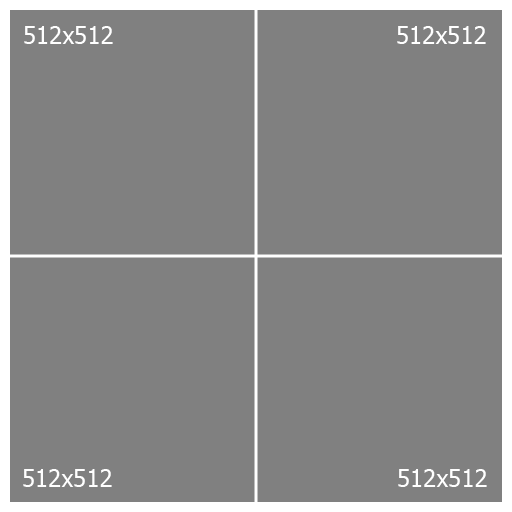
<style>
.page{position:relative;width:512px;height:512px;background:#808080}
.page>*{position:absolute;margin:0}
.t1{font:24px "Tahoma";color:#ffffff}
</style>
<div class="page">
<p class="t1" style="left:24px;top:26px;width:89px;height:18px">512x512</p>
<p class="t1" style="left:397px;top:26px;width:89px;height:18px">512x512</p>
<p class="t1" style="left:23px;top:469px;width:89px;height:18px">512x512</p>
<p class="t1" style="left:398px;top:469px;width:89px;height:18px">512x512</p>
</div>
